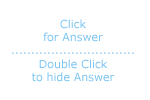
<style>
.page{position:relative;width:150px;height:100px;background:#ffffff}
.page>*{position:absolute;margin:0}
.t1{font:11px "Verdana";color:#7dc5f1}
</style>
<div class="page">
<p class="t1" style="left:12px;top:19px;width:122px;height:63px;text-align:center">Click <br>for Answer<br>...............................<br>Double Click <br>to hide Answer</p>
</div>
